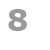
<style>
.page{position:relative;width:50px;height:50px;background:#ffffff}
.page>*{position:absolute;margin:0}
.t1{font:30px "Verdana-Bold";color:#999999}
</style>
<div class="page">
<p class="t1" style="left:8px;top:9px;width:19px;height:22px">8</p>
</div>
